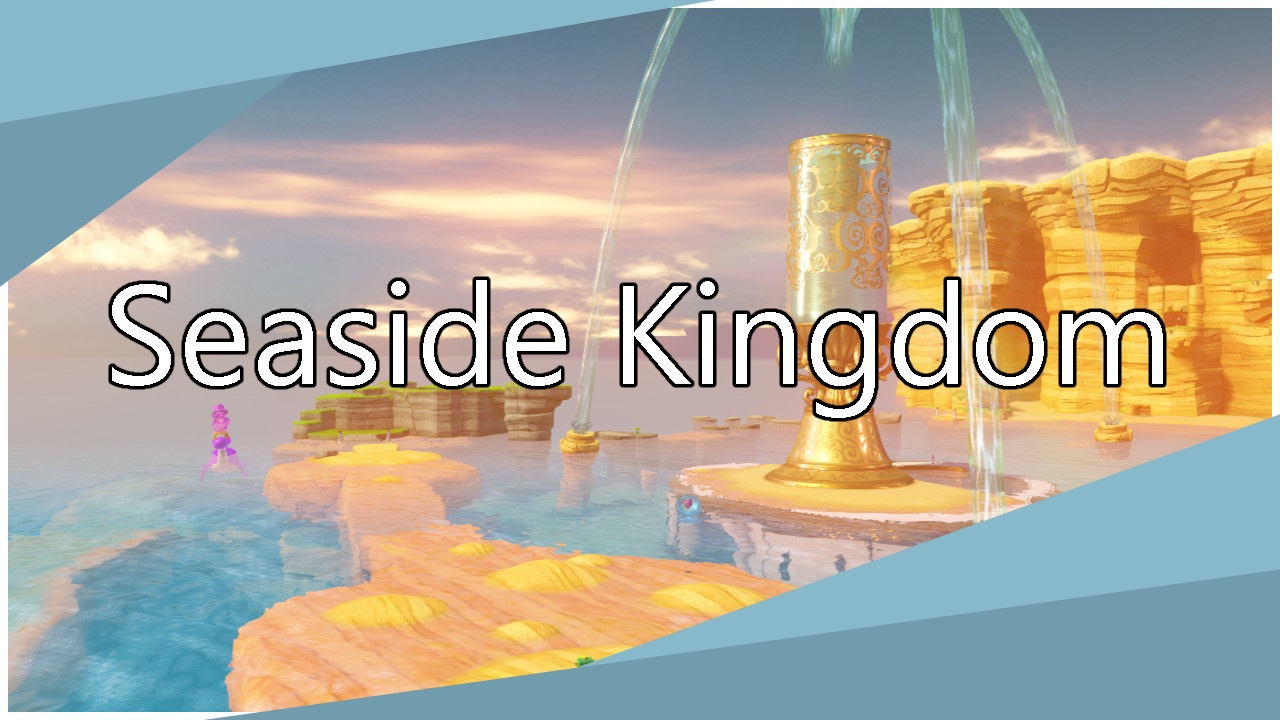
<style>
.page{position:relative;width:1280px;height:720px}
.page>*{position:absolute;margin:0}
.t1{font:140px "SegoeUI";color:#ffffff}
</style>
<div class="page">
<p class="t1" style="left:112px;top:280px;width:1051px;height:138px">Seaside Kingdom</p>
</div>
